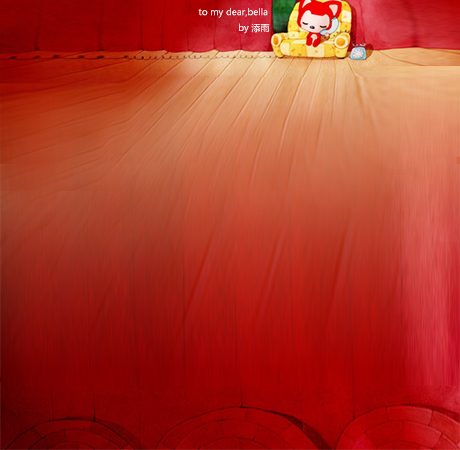
<style>
.page{position:relative;width:460px;height:450px}
.page>*{position:absolute;margin:0}
.t1{font:9px "MicrosoftYaHei";color:#ffffff}
</style>
<div class="page">
<p class="t1" style="left:198px;top:8px;width:72px;height:26px">to my dear,bella<br>               by 添雨</p>
</div>
